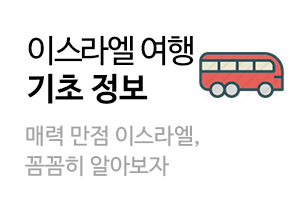
<style>
.page{position:relative;width:300px;height:211px;background:#ffffff}
.page>*{position:absolute;margin:0}
.t1{font:32px "NanumBarunGothicOTF";letter-spacing:-0.05em;color:#000000}
.t2{font:32px "NanumBarunGothicOTFBold";color:#000000}
.t3{font:22.1px/30px "NanumBarunGothicOTF";color:#a3a3a3}
</style>
<div class="page">
<p class="t1" style="left:27px;top:35px;width:167px;height:69px">이스라엘 여행 <br><span class="t2">기초 정보</span></p>
<p class="t3" style="left:25px;top:125px;width:174px;height:52px">매력 만점 이스라엘,<br>꼼꼼히 알아보자</p>
</div>
